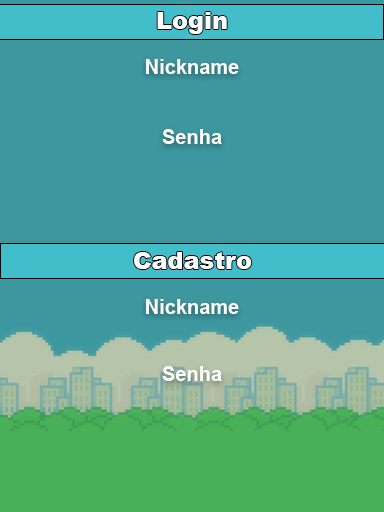
<style>
.page{position:relative;width:384px;height:512px;background:#3d979f}
.page>*{position:absolute;margin:0}
.t1{font:24px "Arial-Black";color:#ffffff}
.t2{font:20px "Arial-BoldMT";color:#ffffff}
</style>
<div class="page">
<p class="t1" style="left:157px;top:12px;width:70px;height:22px">Login</p>
<p class="t2" style="left:146px;top:59px;width:93px;height:85px;text-align:center">Nickname<br><br><br> <br>Senha</p>
<p class="t1" style="left:134px;top:252px;width:118px;height:17px">Cadastro</p>
<p class="t2" style="left:146px;top:299px;width:93px;height:82px;text-align:center">Nickname<br><br><br>Senha</p>
</div>
